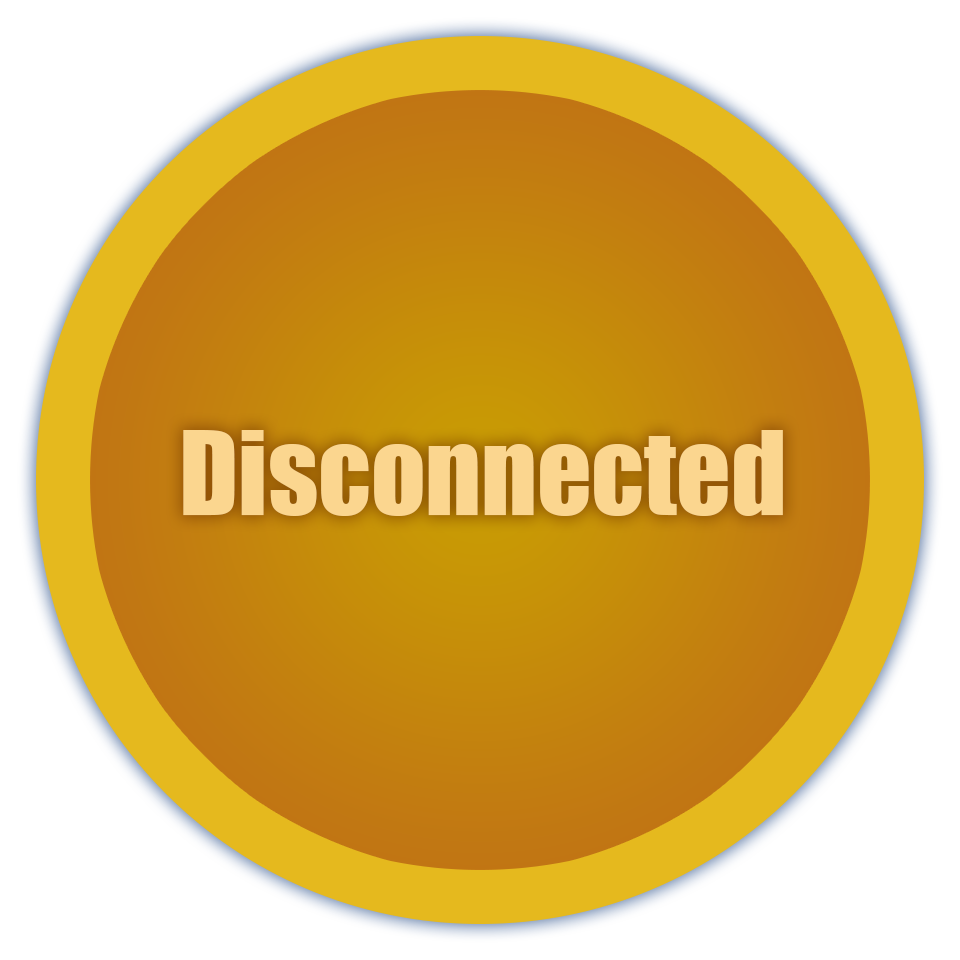
<style>
.page{position:relative;width:960px;height:960px;background:#ffffff}
.page>*{position:absolute;margin:0}
.t1{font:106.7px "Impact";color:#fbd68f}
</style>
<div class="page">
<p class="t1" style="left:183px;top:430px;width:600px;height:86px">Disconnected</p>
</div>
